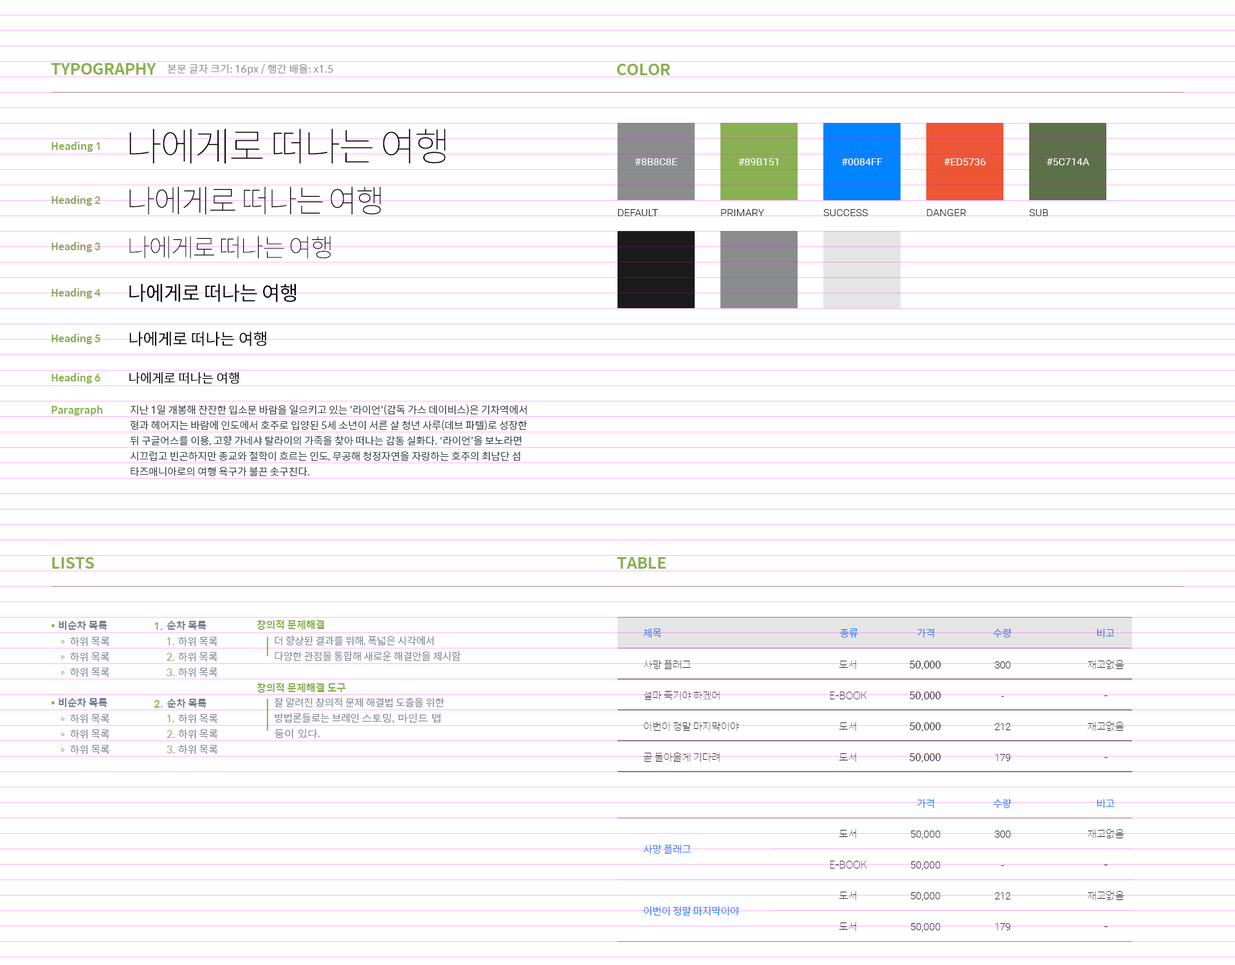
<style>
.page{position:relative;width:1235px;height:965px;background:#ffffff}
.page>*{position:absolute;margin:0}
.t1{font:15.4px "SpoqaHanSans-Bold";letter-spacing:-0.005em;color:#89b151}
.t2{font:10.2px "SpoqaHanSans-Regular";letter-spacing:-0.005em;color:#8b8c8e}
.t3{font:15.6px "SpoqaHanSans-Bold";letter-spacing:-0.005em;color:#89b151}
.t4{font:39.3px "SpoqaHanSans-Thin";letter-spacing:-0.045em;color:#000000}
.t5{font:10.3px "SpoqaHanSans-Bold";letter-spacing:-0.005em;color:#89b151}
.t6{font:10.3px "Roboto-Regular";color:#ffffff;text-transform:uppercase}
.t7{font:31.4px "SpoqaHanSans-Thin";letter-spacing:-0.05em;color:#000000}
.t8{font:7.7px "Roboto-Light";color:#1a1a1a;text-transform:uppercase}
.t9{font:7.7px "Roboto-Light";text-transform:uppercase}
.t10{font:25.1px "SpoqaHanSans-Thin";letter-spacing:-0.05em;color:#000000}
.t11{font:20.1px "SpoqaHanSans-Regular";letter-spacing:-0.025em;color:#000000}
.t12{font:16.1px "SpoqaHanSans-Regular";letter-spacing:-0.005em;color:#000000}
.t13{font:12.9px "SpoqaHanSans-Regular";letter-spacing:-0.005em;color:#000000}
.t14{font:10.3px "SpoqaHanSans-Regular";letter-spacing:-0.01em;color:#333741}
.t15{font:10.3px "SpoqaHanSans-Bold";letter-spacing:-0.005em;color:#787f94}
.t16{font:7.7px "SpoqaHanSans-Bold";letter-spacing:-0.005em;color:#89b151}
.t17{font:10.3px "SpoqaHanSans-Regular";letter-spacing:-0.025em;color:#0084ff;text-transform:uppercase}
.t18{font:10.3px "SpoqaHanSans-Regular";letter-spacing:-0.005em;color:#787f94}
.t19{font:7.7px "SpoqaHanSans-Regular";letter-spacing:-0.005em;color:#89b151}
.t20{font:10.3px "SpoqaHanSans-Regular";letter-spacing:-0.02em;color:#787f94}
.t21{font:10.3px "SpoqaHanSans-Thin";letter-spacing:-0.025em;color:#272522;text-transform:uppercase}
.t22{font:10.3px "Helvetica";color:#272522;text-transform:uppercase}
.t23{font:10.3px "Roboto-Light";letter-spacing:-0.025em;color:#272522;text-transform:uppercase}
.t24{font:10.3px "AppleGothic";letter-spacing:-0.02em;color:#787f94}
.t25{font:10.3px "Roboto-Light";color:#272522;text-transform:uppercase}
</style>
<div class="page">
<p class="t1" style="left:51px;top:63px;width:105px;height:12px">TYPOGRAPHY</p>
<p class="t2" style="left:167px;top:64px;width:166px;height:11px">본문 글자 크기: 16px / 행간 배율: x1.5</p>
<p class="t3" style="left:617px;top:64px;width:53px;height:11px">COLOR</p>
<p class="t4" style="left:129px;top:129px;width:317px;height:34px">나에게로 떠나는 여행</p>
<p class="t5" style="left:51px;top:142px;width:49px;height:10px">Heading 1</p>
<p class="t6" style="left:635px;top:158px;width:43px;height:7px">#8b8c8e</p>
<p class="t6" style="left:739px;top:158px;width:40px;height:7px">#89b151</p>
<p class="t6" style="left:842px;top:158px;width:41px;height:7px">#0084ff</p>
<p class="t6" style="left:945px;top:158px;width:41px;height:7px">#ed5736</p>
<p class="t6" style="left:1047px;top:158px;width:43px;height:7px">#5c714a</p>
<p class="t5" style="left:51px;top:196px;width:49px;height:10px">Heading 2</p>
<p class="t7" style="left:129px;top:187px;width:252px;height:28px">나에게로 떠나는 여행</p>
<p class="t8" style="left:618px;top:209px;width:40px;height:7px">DEFAULT</p>
<p class="t8" style="left:721px;top:209px;width:43px;height:7px">PRIMARY</p>
<p class="t9" style="left:824px;top:209px;width:44px;height:7px">SUCCESS</p>
<p class="t8" style="left:927px;top:209px;width:39px;height:7px">DANGER</p>
<p class="t9" style="left:1030px;top:209px;width:19px;height:7px">SUB</p>
<p class="t5" style="left:51px;top:242px;width:49px;height:10px">Heading 3</p>
<p class="t10" style="left:129px;top:236px;width:202px;height:23px">나에게로 떠나는 여행</p>
<p class="t5" style="left:51px;top:288px;width:49px;height:11px">Heading 4</p>
<p class="t11" style="left:129px;top:284px;width:168px;height:18px">나에게로 떠나는 여행</p>
<p class="t5" style="left:51px;top:334px;width:49px;height:10px">Heading 5</p>
<p class="t12" style="left:129px;top:331px;width:137px;height:15px">나에게로 떠나는 여행</p>
<p class="t5" style="left:51px;top:373px;width:49px;height:11px">Heading 6</p>
<p class="t13" style="left:129px;top:372px;width:110px;height:12px">나에게로 떠나는 여행</p>
<p class="t5" style="left:51px;top:405px;width:52px;height:11px">Paragraph</p>
<p class="t14" style="left:130px;top:405px;width:398px;height:72px">지난 1일 개봉해 잔잔한 입소문 바람을 일으키고 있는 '라이언'(감독 가스 데이비스)은 기차역에서 형과 헤어지는 바람에 인도에서 호주로 입양된 5세 소년이 서른 살 청년 사루(데브 파텔)로 성장한 뒤 구글어스를 이용, 고향 가네샤 탈라이의 가족을 찾아 떠나는 감동 실화다. ‘라이언’을 보노라면 시끄럽고 빈곤하지만 종교와 철학이 흐르는 인도, 무공해 청정자연을 자랑하는 호주의 최남단 섬 타즈매니아로의 여행 욕구가 불끈 솟구친다.</p>
<p class="t1" style="left:52px;top:557px;width:43px;height:12px">LISTS</p>
<p class="t1" style="left:617px;top:557px;width:49px;height:12px">TABLE</p>
<p class="t15" style="left:59px;top:621px;width:48px;height:9px">비순차 목록</p>
<p class="t16" style="left:154px;top:622px;width:9px;height:8px">1.</p>
<p class="t15" style="left:167px;top:621px;width:40px;height:9px">순차 목록</p>
<p class="t5" style="left:257px;top:620px;width:67px;height:10px">창의적 문제해결</p>
<p class="t17" style="left:643px;top:629px;width:18px;height:9px">제목</p>
<p class="t17" style="left:840px;top:629px;width:18px;height:9px">종류</p>
<p class="t17" style="left:917px;top:629px;width:17px;height:9px">가격</p>
<p class="t17" style="left:994px;top:629px;width:18px;height:9px">수량</p>
<p class="t17" style="left:1097px;top:629px;width:18px;height:9px">비고</p>
<p class="t18" style="left:70px;top:637px;width:39px;height:40px">하위 목록<br>하위 목록<br>하위 목록</p>
<p class="t19" style="left:167px;top:638px;width:8px;height:38px">1.<br>2.<br>3.</p>
<p class="t18" style="left:178px;top:637px;width:39px;height:40px">하위 목록<br>하위 목록<br>하위 목록</p>
<p class="t20" style="left:275px;top:636px;width:186px;height:25px">더 향상된 결과를 위해, 폭넓은 시각에서 다양한 관점을 통합해 새로운 해결안을 제시함</p>
<p class="t21" style="left:643px;top:660px;width:96px;height:102px">사망 플래그<br>설마 죽기야 하겠어<br>이번이 정말 마지막이야<br>곧 돌아올게 기다려</p>
<p class="t21" style="left:830px;top:660px;width:37px;height:102px;text-align:center">도서<br>e-book<br>도서<br>도서</p>
<p class="t22" style="left:910px;top:661px;width:31px;height:101px">50,000<br>50,000<br>50,000<br>50,000</p>
<p class="t23" style="left:995px;top:661px;width:17px;height:100px;text-align:center">300<br>-<br>212<br>179</p>
<p class="t21" style="left:1088px;top:660px;width:37px;height:98px;text-align:center">재고없음<br>-<br>재고없음<br>-</p>
<p class="t5" style="left:257px;top:683px;width:89px;height:10px">창의적 문제해결 도구</p>
<p class="t15" style="left:59px;top:698px;width:48px;height:9px">비순차 목록</p>
<p class="t16" style="left:154px;top:700px;width:9px;height:8px">2.</p>
<p class="t15" style="left:167px;top:699px;width:40px;height:9px">순차 목록</p>
<p class="t20" style="left:274px;top:698px;width:171px;height:41px">잘 알려진 창의적 문제 해결법 도출을 위한 방법론들로는 브레인 <span class="t24">스토밍, 마인드 맵 등이 있다.</span></p>
<p class="t18" style="left:70px;top:714px;width:39px;height:40px">하위 목록<br>하위 목록<br>하위 목록</p>
<p class="t19" style="left:167px;top:715px;width:8px;height:38px">1.<br>2.<br>3.</p>
<p class="t18" style="left:178px;top:714px;width:40px;height:40px">하위 목록<br>하위 목록<br>하위 목록</p>
<p class="t17" style="left:917px;top:799px;width:17px;height:9px">가격</p>
<p class="t17" style="left:994px;top:799px;width:18px;height:9px">수량</p>
<p class="t17" style="left:1097px;top:799px;width:18px;height:9px">비고</p>
<p class="t21" style="left:830px;top:829px;width:37px;height:102px;text-align:center">도서<br>e-book<br>도서<br>도서</p>
<p class="t25" style="left:911px;top:831px;width:30px;height:101px">50,000<br>50,000<br>50,000<br>50,000</p>
<p class="t23" style="left:995px;top:831px;width:17px;height:99px;text-align:center">300<br>-<br>212<br>179</p>
<p class="t21" style="left:1088px;top:829px;width:37px;height:98px;text-align:center">재고없음<br>-<br>재고없음<br>-</p>
<p class="t17" style="left:643px;top:845px;width:97px;height:71px">사망 플래그<br><br>이번이 정말 마지막이야</p>
</div>
